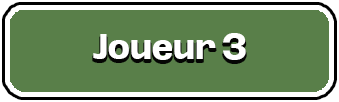
<style>
.page{position:relative;width:339px;height:102px;background:#597f49}
.page>*{position:absolute;margin:0}
.t1{font:33.8px "Oddlini-ExtraBold";color:#ffffff}
</style>
<div class="page">
<p class="t1" style="left:93px;top:33px;width:153px;height:27px">Joueur 3</p>
</div>
